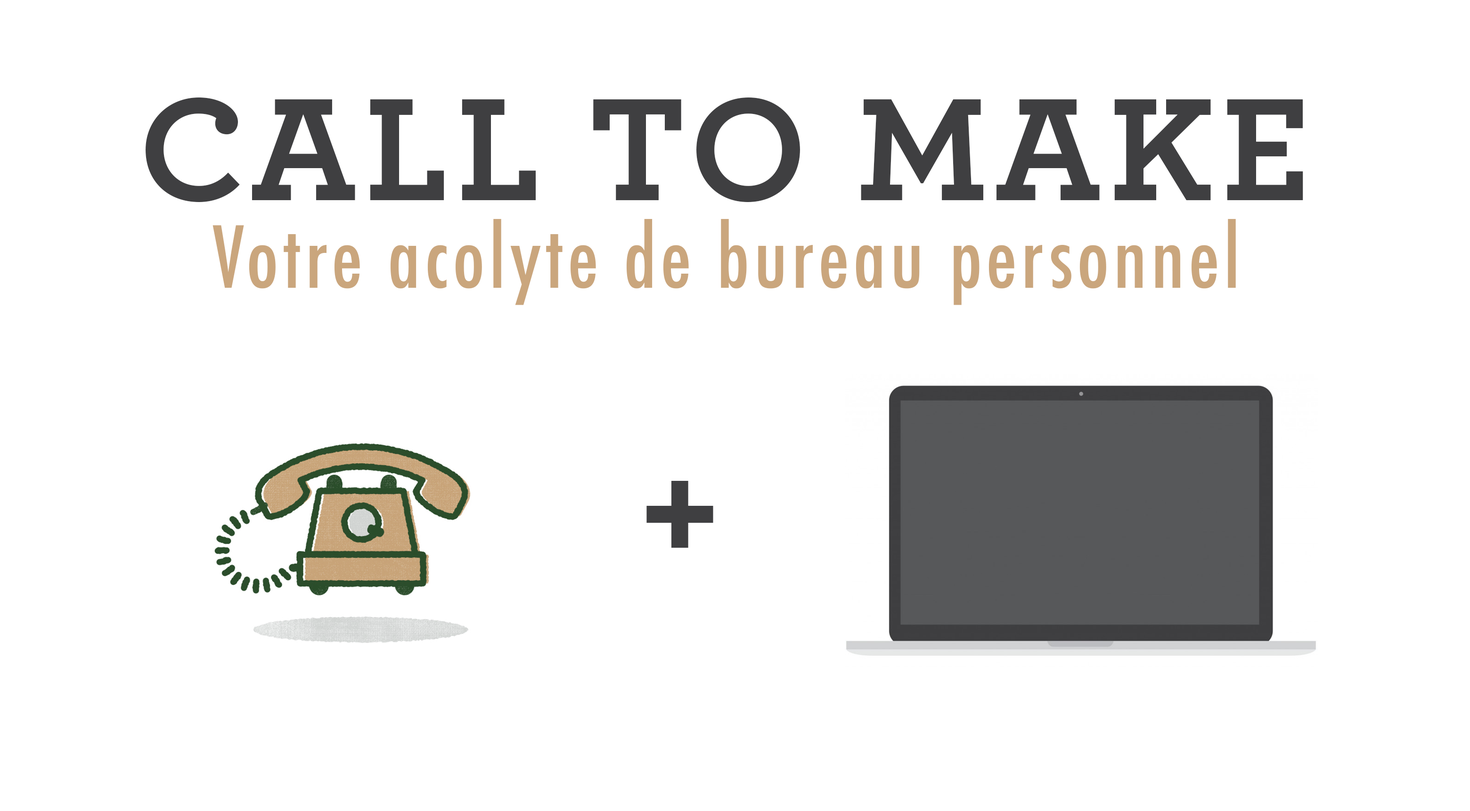
<style>
.page{position:relative;width:1470px;height:811px;background:#ffffff}
.page>*{position:absolute;margin:0}
.t1{font:153.5px "Archer-Bold";letter-spacing:0.05em;color:#3f3f41}
.t2{font:83.1px "Futura-CondensedMedium";letter-spacing:0.05em;color:#caa67d}
.t3{font:141.3px "Impact";letter-spacing:0.05em;color:#3f3f41}
</style>
<div class="page">
<p class="t1" style="left:146px;top:98px;width:1157px;height:104px">CALL TO MAKE</p>
<p class="t2" style="left:212px;top:219px;width:1024px;height:86px">Votre acolyte de bureau personnel</p>
<p class="t3" style="left:646px;top:481px;width:67px;height:67px">+</p>
</div>
